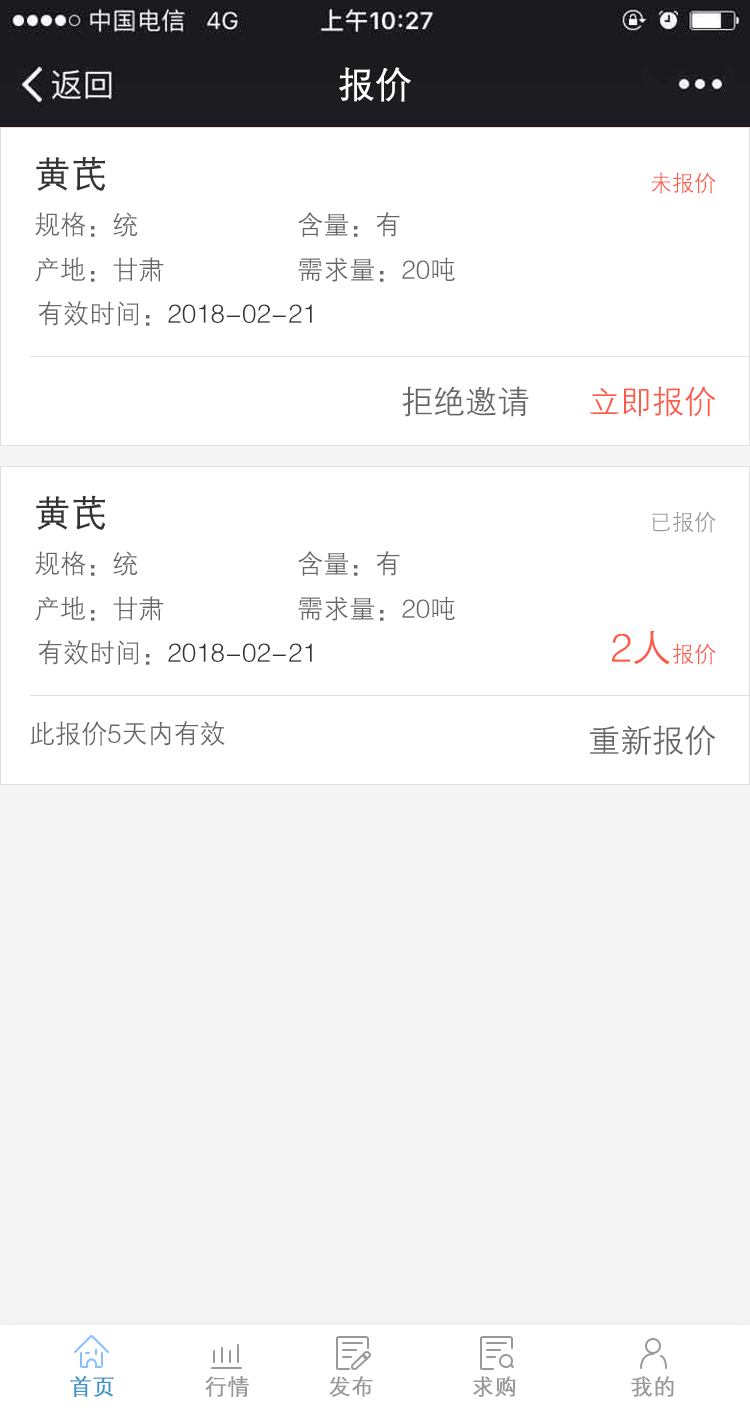
<style>
.page{position:relative;width:750px;height:1413px;background:#ffffff}
.page>*{position:absolute;margin:0}
.t1{font:36px "FZZDXJW--GB1-0";color:#ffffff;font-weight:bold}
.t2{font:36px "FZZDXJW--GB1-0";color:#333333;font-weight:bold}
.t3{font:22px "FZZDXJW--GB1-0";color:#ff5a49}
.t4{font:26px "FZZDXJW--GB1-0";color:#666666}
.t5{font:26px "FZZDXJW--GB1-0";color:#333333}
.t6{font:32px "FZZDXJW--GB1-0";color:#666666}
.t7{font:32px "FZZDXJW--GB1-0";color:#ff5a49}
.t8{font:22px "FZZDXJW--GB1-0";color:#999999}
.t9{font:40px "FZZDXJW--GB1-0";color:#ff5a49}
.t10{font:22px "FZZDXJW--GB1-0";color:#3b95c8;font-weight:bold}
.t11{font:22px "FZZDXJW--GB1-0";color:#999999;font-weight:bold}
</style>
<div class="page">
<p class="t1" style="left:339px;top:67px;width:72px;height:35px">报价</p>
<p class="t2" style="left:36px;top:156px;width:69px;height:35px">黄芪</p>
<p class="t3" style="left:651px;top:172px;width:65px;height:22px">未报价</p>
<p class="t4" style="left:35px;top:212px;width:103px;height:25px">规格：统</p>
<p class="t4" style="left:298px;top:212px;width:102px;height:25px">含量：有</p>
<p class="t4" style="left:35px;top:257px;width:129px;height:25px">产地：甘肃</p>
<p class="t4" style="left:298px;top:257px;width:157px;height:25px">需求量：20吨</p>
<p class="t5" style="left:38px;top:301px;width:274px;height:25px"><span class="t4">有效时间：</span>2018-02-21</p>
<p class="t6" style="left:402px;top:386px;width:127px;height:31px">拒绝邀请</p>
<p class="t7" style="left:590px;top:386px;width:126px;height:31px">立即报价</p>
<p class="t2" style="left:36px;top:495px;width:69px;height:35px">黄芪</p>
<p class="t8" style="left:652px;top:511px;width:64px;height:22px">已报价</p>
<p class="t4" style="left:35px;top:551px;width:103px;height:25px">规格：统</p>
<p class="t4" style="left:298px;top:551px;width:102px;height:25px">含量：有</p>
<p class="t4" style="left:35px;top:596px;width:129px;height:25px">产地：甘肃</p>
<p class="t4" style="left:298px;top:596px;width:157px;height:25px">需求量：20吨</p>
<p class="t9" style="left:612px;top:630px;width:104px;height:35px">2人<span class="t3">报价</span></p>
<p class="t5" style="left:38px;top:640px;width:274px;height:25px"><span class="t4">有效时间：</span>2018-02-21</p>
<p class="t4" style="left:30px;top:721px;width:195px;height:25px">此报价5天内有效</p>
<p class="t6" style="left:590px;top:725px;width:126px;height:31px">重新报价</p>
<p class="t10" style="left:70px;top:1376px;width:44px;height:21px">首页</p>
<p class="t11" style="left:205px;top:1376px;width:44px;height:21px">行情</p>
<p class="t11" style="left:329px;top:1376px;width:44px;height:21px">发布</p>
<p class="t11" style="left:473px;top:1376px;width:43px;height:21px">求购</p>
<p class="t11" style="left:631px;top:1376px;width:43px;height:21px">我的</p>
</div>
